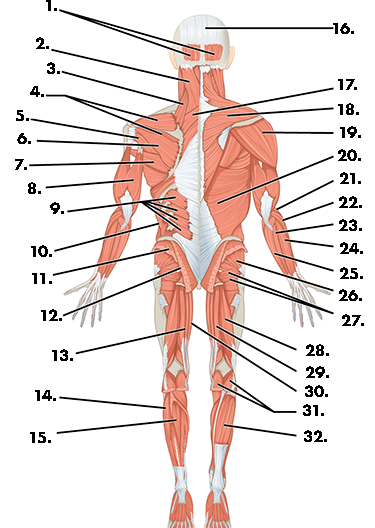
<style>
.page{position:relative;width:375px;height:528px;background:#ffffff}
.page>*{position:absolute;margin:0}
.t1{font:26.1px "Futura-Bold";color:#020202}
</style>
<div class="page">
<p class="t1" style="left:46px;top:0px;width:11px;height:11px">1.</p>
<p class="t1" style="left:333px;top:23px;width:21px;height:11px">16.</p>
<p class="t1" style="left:36px;top:37px;width:13px;height:12px">2.</p>
<p class="t1" style="left:47px;top:62px;width:13px;height:12px">3.</p>
<p class="t1" style="left:30px;top:86px;width:14px;height:11px">4.</p>
<p class="t1" style="left:338px;top:79px;width:19px;height:11px">17.</p>
<p class="t1" style="left:16px;top:110px;width:13px;height:11px">5.</p>
<p class="t1" style="left:338px;top:103px;width:21px;height:12px">18.</p>
<p class="t1" style="left:340px;top:126px;width:21px;height:12px">19.</p>
<p class="t1" style="left:17px;top:133px;width:14px;height:11px">6.</p>
<p class="t1" style="left:338px;top:149px;width:23px;height:12px">20.</p>
<p class="t1" style="left:15px;top:159px;width:12px;height:11px">7.</p>
<p class="t1" style="left:340px;top:172px;width:21px;height:12px">21.</p>
<p class="t1" style="left:28px;top:182px;width:13px;height:12px">8.</p>
<p class="t1" style="left:339px;top:196px;width:23px;height:12px">22.</p>
<p class="t1" style="left:50px;top:202px;width:14px;height:12px">9.</p>
<p class="t1" style="left:339px;top:219px;width:23px;height:12px">23.</p>
<p class="t1" style="left:31px;top:245px;width:21px;height:12px">10.</p>
<p class="t1" style="left:340px;top:242px;width:23px;height:12px">24.</p>
<p class="t1" style="left:340px;top:267px;width:23px;height:12px">25.</p>
<p class="t1" style="left:32px;top:273px;width:20px;height:11px">11.</p>
<p class="t1" style="left:339px;top:289px;width:23px;height:12px">26.</p>
<p class="t1" style="left:41px;top:309px;width:21px;height:12px">12.</p>
<p class="t1" style="left:342px;top:314px;width:22px;height:12px">27.</p>
<p class="t1" style="left:52px;top:349px;width:21px;height:12px">13.</p>
<p class="t1" style="left:306px;top:344px;width:23px;height:12px">28.</p>
<p class="t1" style="left:306px;top:366px;width:23px;height:12px">29.</p>
<p class="t1" style="left:35px;top:390px;width:21px;height:11px">14.</p>
<p class="t1" style="left:305px;top:385px;width:23px;height:12px">30.</p>
<p class="t1" style="left:303px;top:404px;width:21px;height:12px">31.</p>
<p class="t1" style="left:30px;top:432px;width:21px;height:11px">15.</p>
<p class="t1" style="left:304px;top:430px;width:23px;height:12px">32.</p>
</div>
